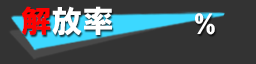
<style>
.page{position:relative;width:256px;height:64px;background:#333333}
.page>*{position:absolute;margin:0}
.t1{font:30.7px "HGSSoeiKakugothicUB";color:#ffffff}
.t2{font:30.7px "HGSSoeiKakugothicUB";color:#ff0000}
.t3{font:30.8px "FranklinGothic-Heavy";color:#ffffff}
</style>
<div class="page">
<p class="t1" style="left:21px;top:6px;width:91px;height:30px"><span class="t2">解</span>放率</p>
<p class="t3" style="left:195px;top:13px;width:20px;height:22px">%</p>
</div>
